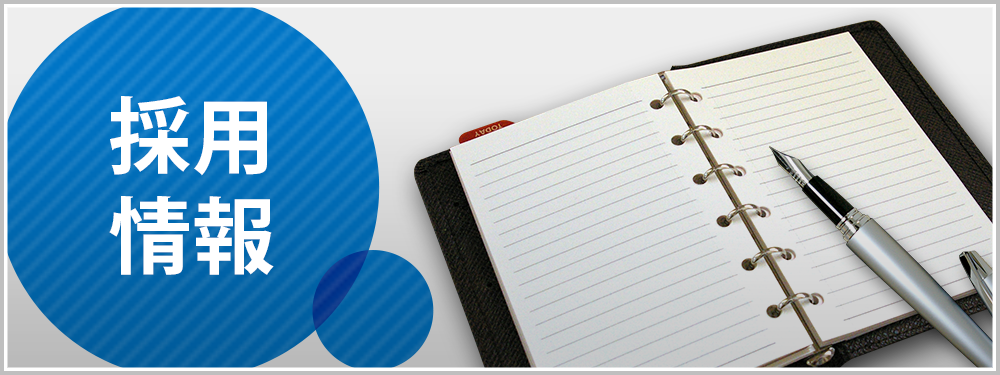
<style>
.page{position:relative;width:1000px;height:375px}
.page>*{position:absolute;margin:0}
.t1{font:83.3px/100px "KozGoPro-Bold";color:#ffffff}
</style>
<div class="page">
<p class="t1" style="left:109px;top:96px;width:165px;height:179px">採用<br>情報</p>
</div>
